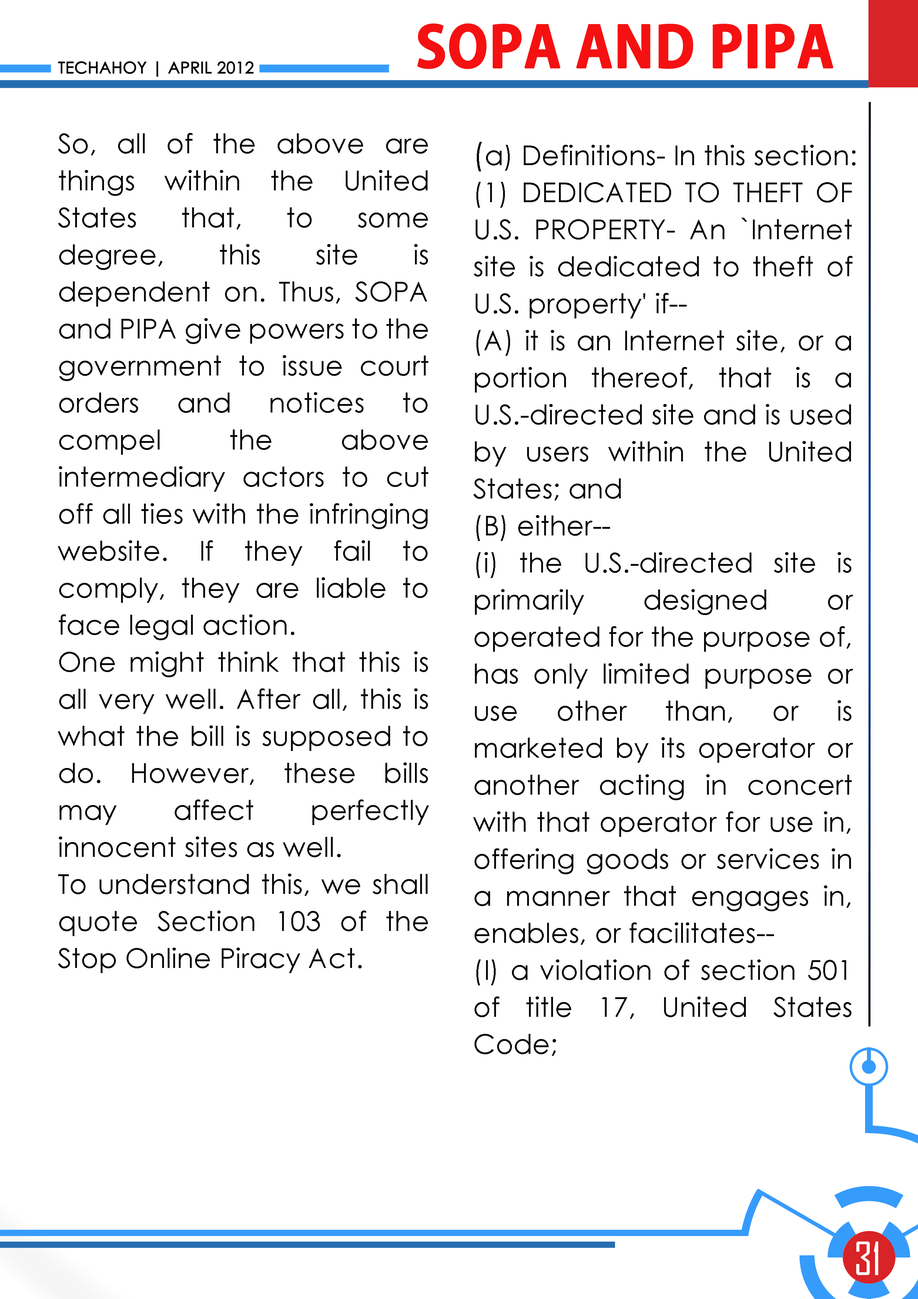
<style>
.page{position:relative;width:918px;height:1299px;background:#ffffff}
.page>*{position:absolute;margin:0}
.t1{font:55.5px "AdobeGothicStd-Bold";color:#f51111;text-transform:uppercase;font-weight:bold}
.t2{font:16px "CenturyGothic";color:#000000;text-transform:uppercase;font-weight:bold}
.t3{font:27.5px/37px "CenturyGothic";color:#080808}
.t4{font:31px/37px "CenturyGothic";color:#080808}
.t5{font:43.7px "AgencyFB-Reg";color:#ffffff;text-transform:uppercase}
</style>
<div class="page">
<p class="t1" style="left:417px;top:23px;width:416px;height:46px">sopa and pipa</p>
<p class="t2" style="left:58px;top:61px;width:196px;height:16px">techahoy | APRIL 2012</p>
<p class="t3" style="left:58px;top:133px;width:371px;height:840px;text-align:justify">So, all of the above are things within the United States that, to some degree, this site is dependent on. Thus, SOPA and PIPA give powers to the government to issue court orders and notices to compel the above intermediary actors to cut off all ties with the infringing website. If they fail to comply, they are liable to face legal action.<br>One might think that this is all very well. After all, this is what the bill is supposed to do. However, these bills may affect perfectly innocent sites as well.<br>To understand this, we shall quote Section 103 of the Stop Online Piracy Act.</p>
<p class="t3" style="left:473px;top:142px;width:383px;height:914px;text-align:justify"><span class="t4">(</span>a) Definitions- In this section:<br>(1) DEDICATED TO THEFT OF U.S. PROPERTY- An `Internet site is dedicated to theft of U.S. property' if--<br>(A) it is an Internet site, or a portion thereof, that is a U.S.-directed site and is used by users within the United States; and<br>(B) either--<br>(i) the U.S.-directed site is primarily designed or operated for the purpose of, has only limited purpose or use other than, or is marketed by its operator or another acting in concert with that operator for use in, offering goods or services in a manner that engages in, enables, or facilitates--<br>(I) a violation of section 501 of title 17, United States Code;</p>
<p class="t5" style="left:856px;top:1241px;width:23px;height:34px">31</p>
</div>
